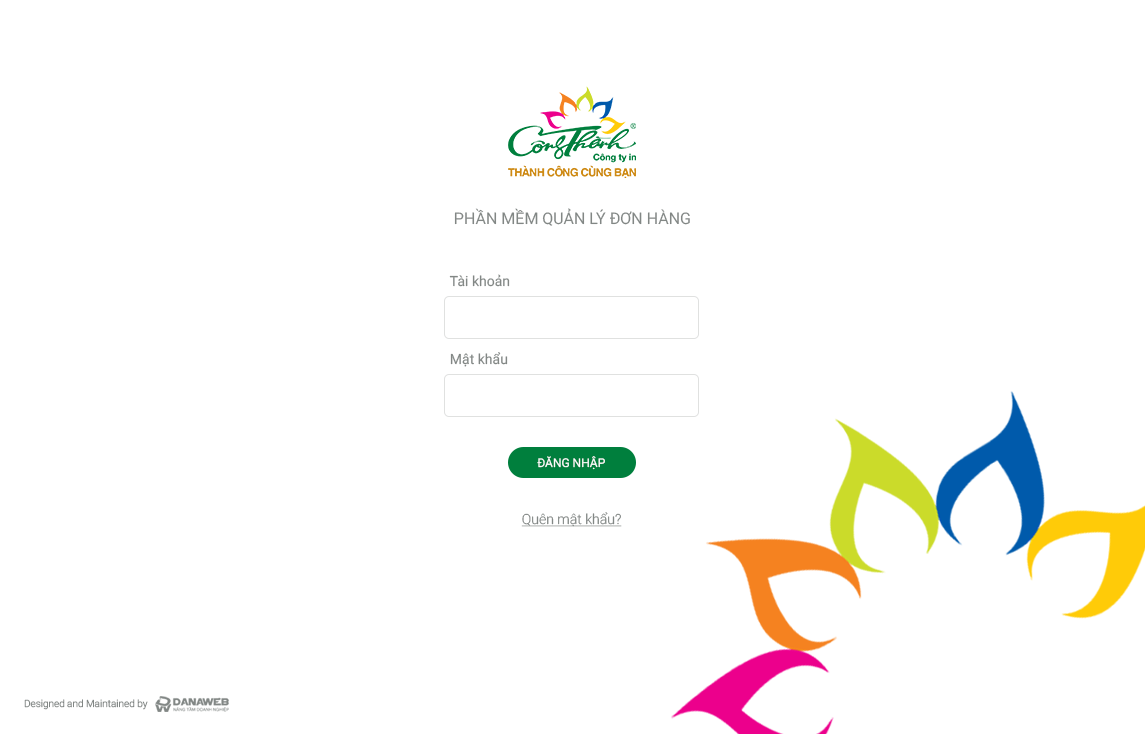
<style>
.page{position:relative;width:1145px;height:734px;background:#ffffff}
.page>*{position:absolute;margin:0}
.t1{font:16px "Roboto-Regular";color:#828785}
.t2{font:14px "Roboto-Regular";color:#828785}
.t3{font:12px "Roboto-Regular";color:#ffffff}
.t4{font:14px "Roboto-Light";color:#828785;text-decoration:underline}
.t5{font:10px "Roboto-Light";color:#868786}
</style>
<div class="page">
<p class="t1" style="left:454px;top:208px;width:236px;height:18px">PHẦN MỀM QUẢN LÝ ĐƠN HÀNG</p>
<p class="t2" style="left:449px;top:274px;width:61px;height:13px">Tài khoản</p>
<p class="t2" style="left:450px;top:352px;width:58px;height:15px">Mật khẩu</p>
<p class="t3" style="left:537px;top:456px;width:68px;height:14px">ĐĂNG NHẬP</p>
<p class="t4" style="left:521px;top:512px;width:101px;height:15px">Quên mật khẩu?</p>
<p class="t5" style="left:24px;top:699px;width:124px;height:11px">Designed and Maintained by</p>
</div>
